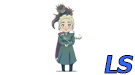
<style>
.page{position:relative;width:135px;height:75px;background:#ffffff}
.page>*{position:absolute;margin:0}
.t1{font:24px "Tahoma-Bold";letter-spacing:-0.065em;font-weight:bold;font-style:italic}
</style>
<div class="page">
<p class="t1" style="left:104px;top:55px;width:30px;height:19px">LS</p>
</div>
